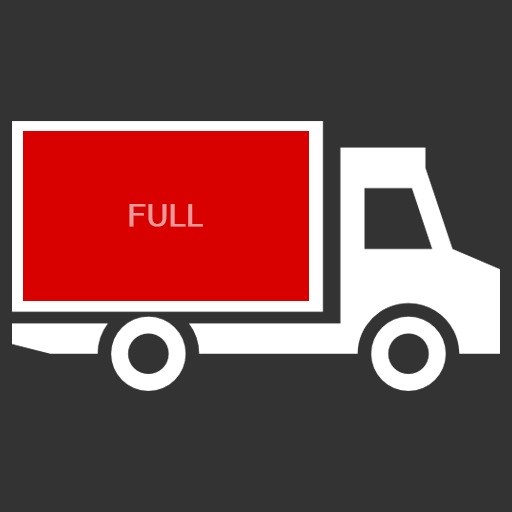
<style>
.page{position:relative;width:512px;height:512px;background:#333333}
.page>*{position:absolute;margin:0}
.t1{font:30px "Helvetica";color:#eb9a9a;font-weight:bold}
</style>
<div class="page">
<p class="t1" style="left:129px;top:204px;width:74px;height:23px">FULL</p>
</div>
